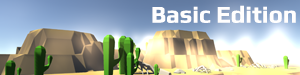
<style>
.page{position:relative;width:300px;height:75px}
.page>*{position:absolute;margin:0}
.t1{font:24px "Play-Bold";color:#fffefe}
</style>
<div class="page">
<p class="t1" style="left:152px;top:5px;width:144px;height:18px">Basic Edition</p>
</div>
